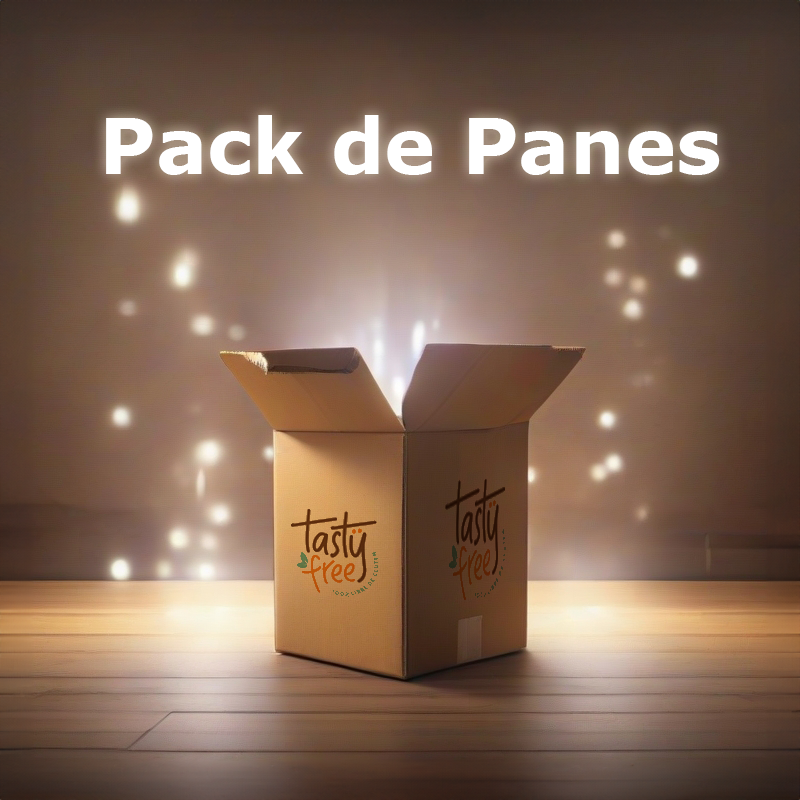
<style>
.page{position:relative;width:800px;height:800px}
.page>*{position:absolute;margin:0}
.t1{font:77.1px "Verdana-Bold";color:#ffffff}
</style>
<div class="page">
<p class="t1" style="left:106px;top:115px;width:614px;height:60px">Pack de Panes</p>
</div>
